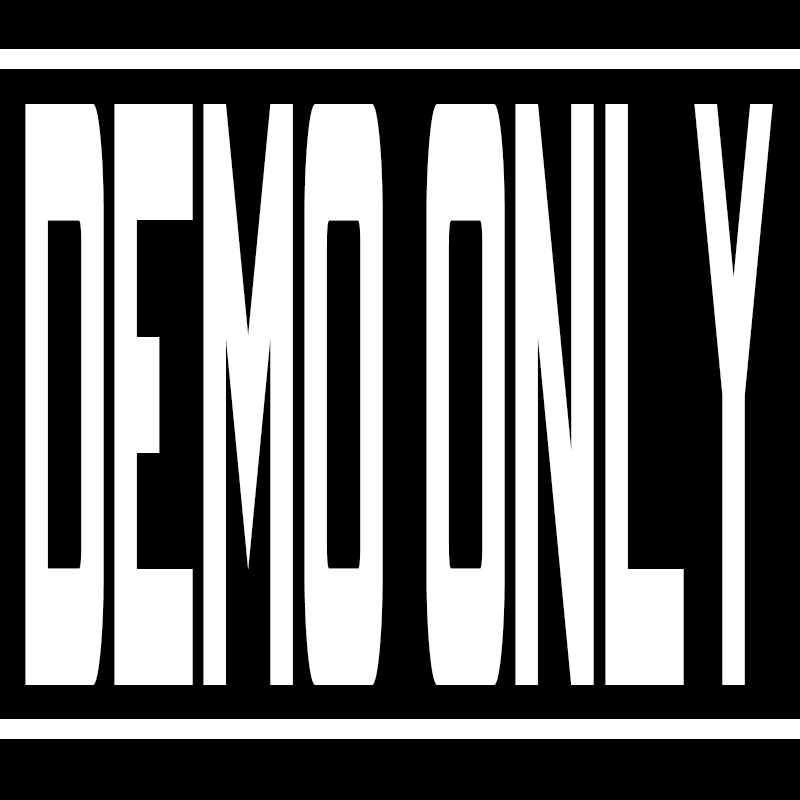
<style>
.page{position:relative;width:800px;height:800px;background:#000000}
.page>*{position:absolute;margin:0}
.t1{font:929px "SpaceMarineNominal";color:#ffffff;scale:0.1 1}
</style>
<div class="page">
<p class="t1" style="left:25px;top:104px;width:748px;height:581px">DEMO Only</p>
</div>
